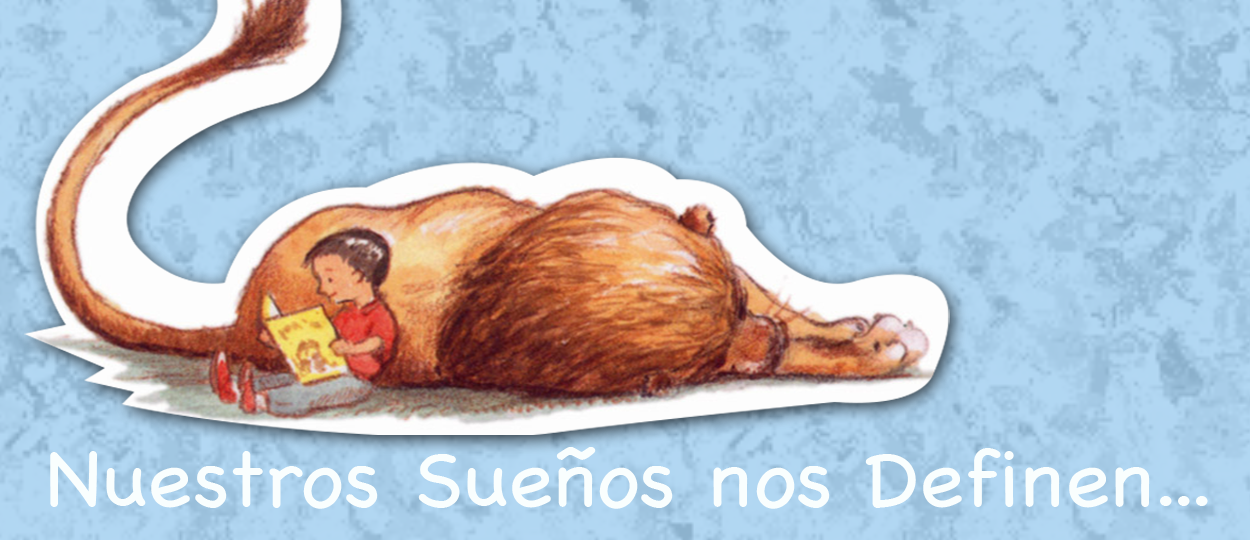
<style>
.page{position:relative;width:1250px;height:540px}
.page>*{position:absolute;margin:0}
.t1{font:79.4px "Chalkboard";color:#f9fefe;scale:1.07 1}
</style>
<div class="page">
<p class="t1" style="left:50px;top:447px;width:1158px;height:62px">Nuestros Sueños nos Definen...</p>
</div>
